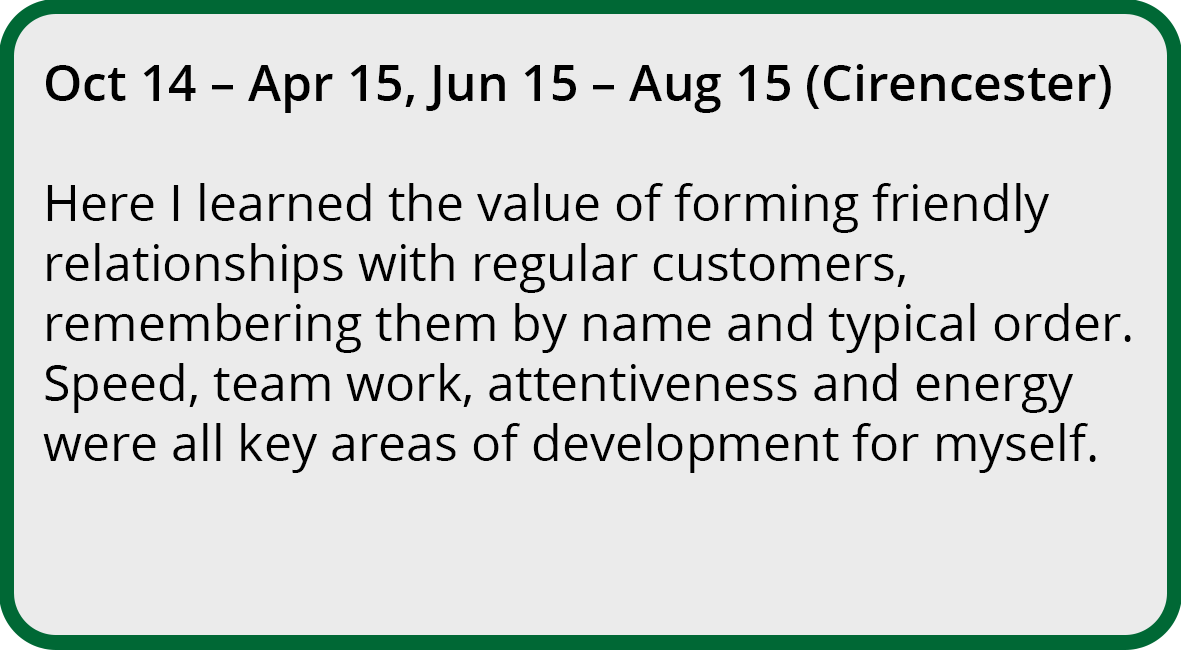
<style>
.page{position:relative;width:1181px;height:650px;background:#ebebeb}
.page>*{position:absolute;margin:0}
.t1{font:50px "OpenSans-Regular";color:#000000}
.t2{font:50px "OpenSans-SemiBold";color:#000000}
</style>
<div class="page">
<p class="t1" style="left:43px;top:64px;width:1088px;height:409px"><span class="t2">Oct 14 – Apr 15, Jun 15 – Aug 15 (Cirencester)<br></span><br>Here I learned the value of forming friendly relationships with regular customers, remembering them by name and typical order.<br>Speed, team work, attentiveness and energy were all key areas of development for myself.</p>
</div>
